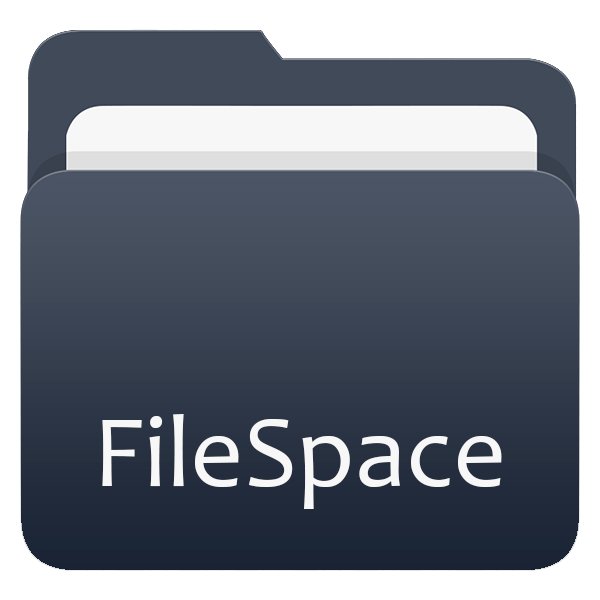
<style>
.page{position:relative;width:600px;height:600px}
.page>*{position:absolute;margin:0}
.t1{font:104px "Candara";color:#f7f7f8}
</style>
<div class="page">
<p class="t1" style="left:102px;top:414px;width:400px;height:95px">FileSpace</p>
</div>
